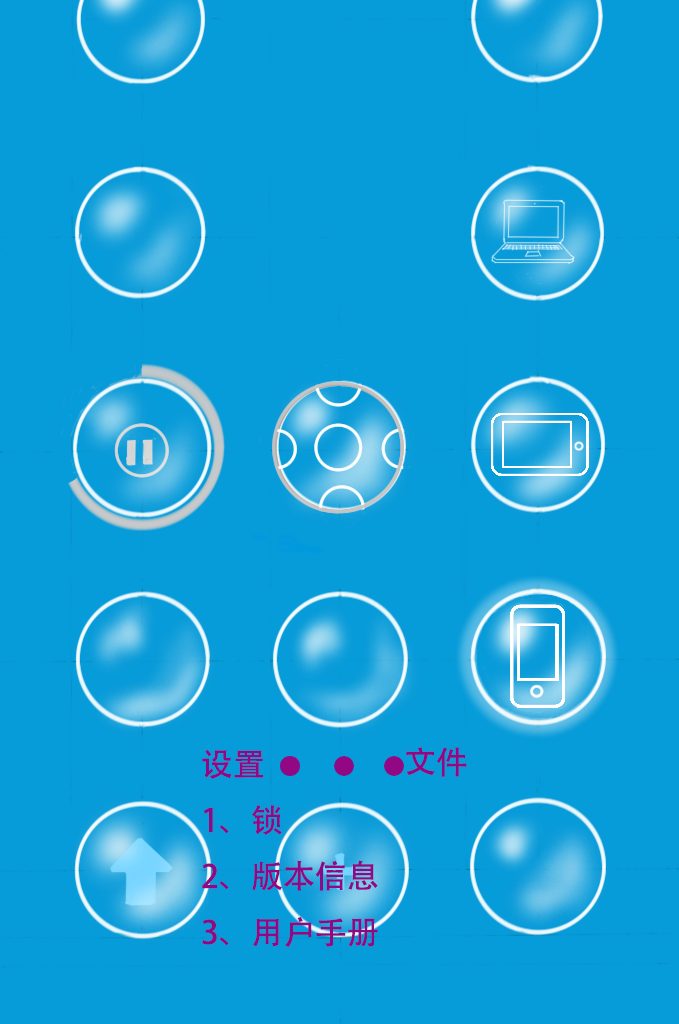
<style>
.page{position:relative;width:679px;height:1024px;background:#069bd9}
.page>*{position:absolute;margin:0}
.t1{font:32px "AdobeHeitiStd-Regular";color:#920783}
</style>
<div class="page">
<p class="t1" style="left:202px;top:750px;width:176px;height:197px">设置<br>1、锁<br>2、版本信息<br>3、用户手册</p>
<p class="t1" style="left:406px;top:747px;width:61px;height:30px">文件</p>
</div>
